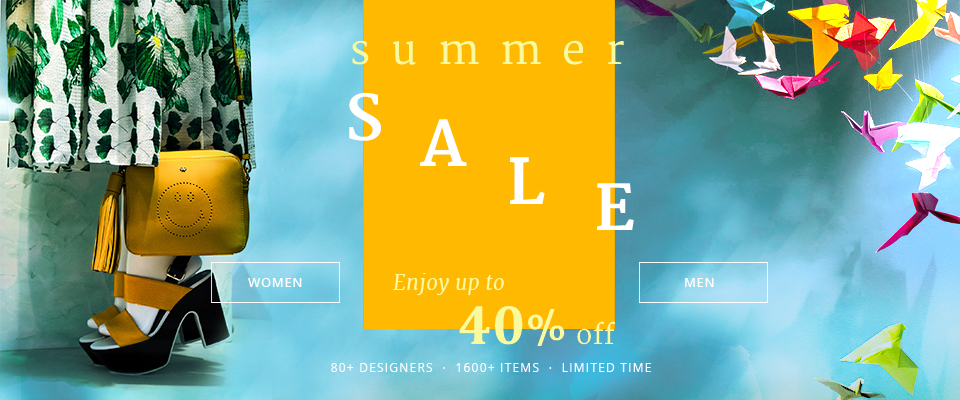
<style>
.page{position:relative;width:960px;height:400px;background:#feb900}
.page>*{position:absolute;margin:0}
.t1{font:41.3px "Merriweather";letter-spacing:0.5em;color:#f9f99e}
.t2{font:61.6px "Merriweather-Bold";letter-spacing:0.05em;color:#ffffff}
.t3{font:13px "OpenSans-Semibold";letter-spacing:0.05em;color:#ffffff}
.t4{font:21.3px "Merriweather-Italic";letter-spacing:0.01em;color:#f9f99e}
.t5{font:27.1px "Merriweather";letter-spacing:0.01em;color:#f9f99d}
.t6{font:56.2px "Cambria-Bold";letter-spacing:0.01em;color:#f9f99d}
.t7{font:42.2px "Merriweather-Bold";letter-spacing:0.01em;color:#f9f99d}
.t8{font:12px "OpenSans";letter-spacing:0.1em;color:#ffffff;text-transform:uppercase}
</style>
<div class="page">
<p class="t1" style="left:352px;top:40px;width:272px;height:25px">summer</p>
<p class="t2" style="left:349px;top:93px;width:32px;height:48px">S</p>
<p class="t2" style="left:420px;top:119px;width:47px;height:47px">A</p>
<p class="t2" style="left:510px;top:157px;width:35px;height:47px">L</p>
<p class="t2" style="left:597px;top:183px;width:37px;height:47px">E</p>
<p class="t3" style="left:248px;top:278px;width:54px;height:9px">WOMEN</p>
<p class="t4" style="left:393px;top:273px;width:111px;height:22px">Enjoy up to</p>
<p class="t3" style="left:685px;top:278px;width:29px;height:9px">MEN</p>
<p class="t5" style="left:459px;top:306px;width:156px;height:40px"><span class="t6">40</span><span class="t7">% </span>off</p>
<p class="t8" style="left:331px;top:363px;width:320px;height:9px">80+ designers  ·  1600+ items  ·  limited time</p>
</div>
